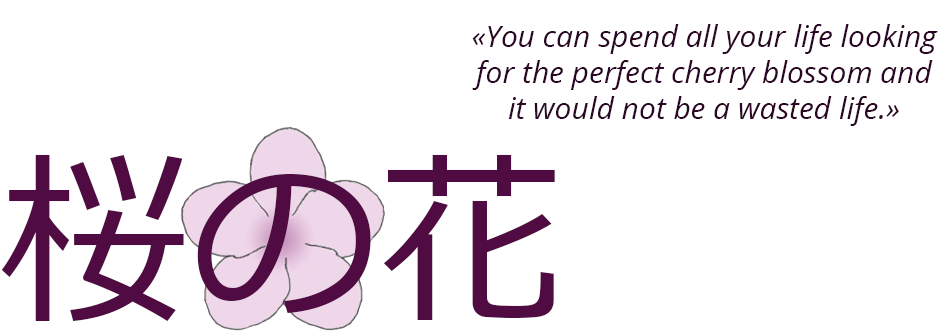
<style>
.page{position:relative;width:950px;height:331px;background:#ffffff}
.page>*{position:absolute;margin:0}
.t1{font:30px "OpenSans-Italic";color:#2c0725}
.t2{font:189px "Meiryo";color:#500b43}
</style>
<div class="page">
<p class="t1" style="left:472px;top:24px;width:466px;height:102px;text-align:center">«You can spend all your life looking for the perfect cherry blossom and it would not be a wasted life.»</p>
<p class="t2" style="left:1px;top:154px;width:554px;height:167px">桜の花</p>
</div>
